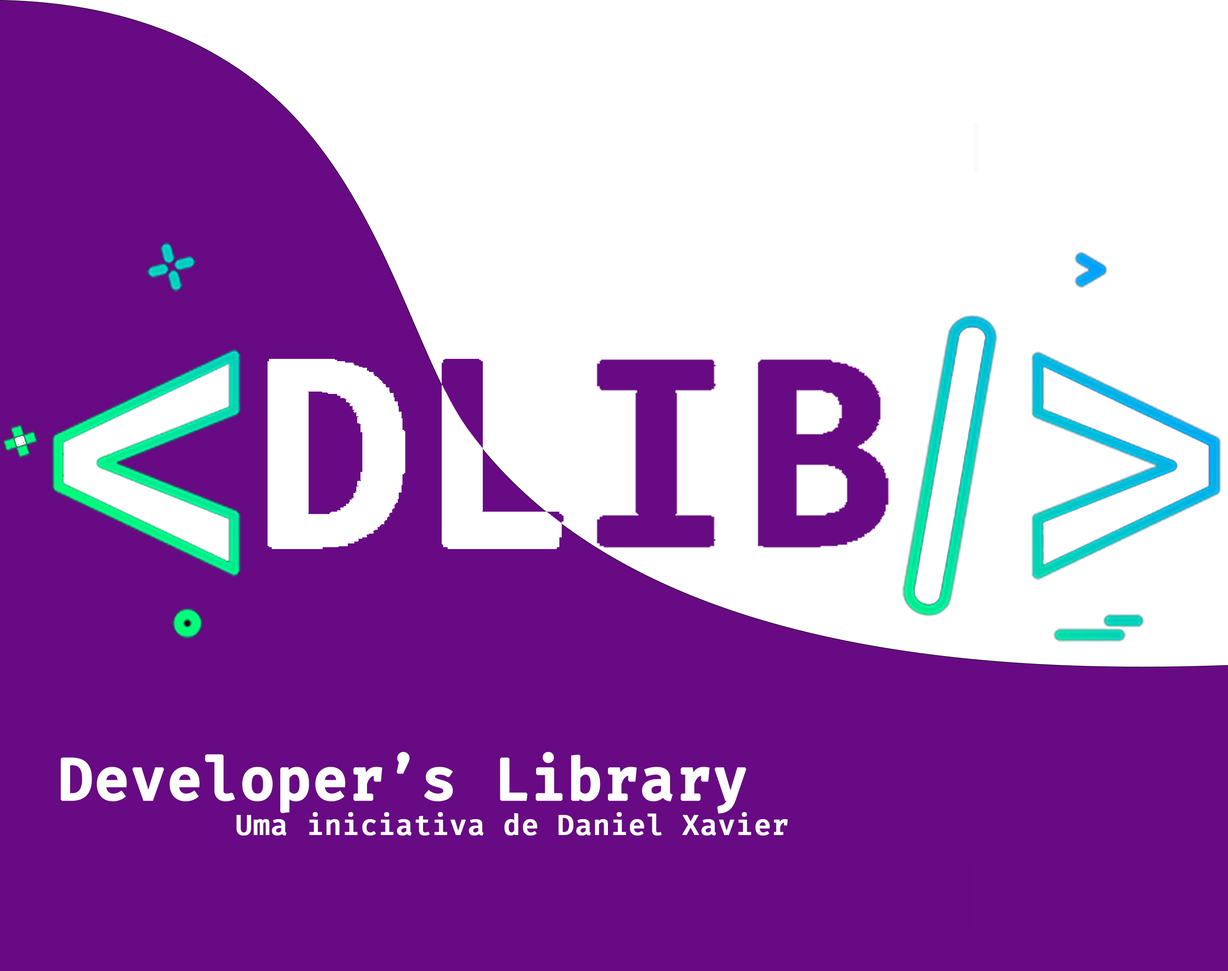
<style>
.page{position:relative;width:1228px;height:971px;background:#680a83}
.page>*{position:absolute;margin:0}
.t1{font:56.7px "FiraCode-Medium";color:#ffffff;font-weight:bold}
.t2{font:27.9px "FiraCode-Medium";color:#ffffff;font-weight:bold}
</style>
<div class="page">
<p class="t1" style="left:61px;top:752px;width:686px;height:62px">Developer’s Library</p>
<p class="t2" style="left:236px;top:812px;width:552px;height:23px">Uma iniciativa de Daniel Xavier</p>
</div>
